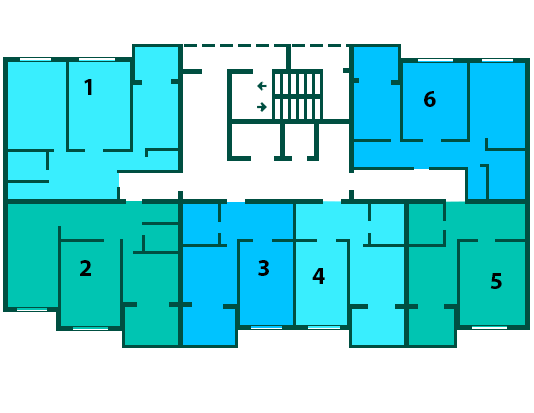
<style>
.page{position:relative;width:534px;height:413px;background:#ffffff}
.page>*{position:absolute;margin:0}
.t1{font:24px "MyriadPro-Bold";color:#000000;text-transform:uppercase}
</style>
<div class="page">
<p class="t1" style="left:84px;top:79px;width:8px;height:16px">1</p>
<p class="t1" style="left:424px;top:91px;width:12px;height:16px">6</p>
<p class="t1" style="left:80px;top:260px;width:11px;height:16px">2</p>
<p class="t1" style="left:258px;top:260px;width:11px;height:16px">3</p>
<p class="t1" style="left:312px;top:268px;width:13px;height:16px">4</p>
<p class="t1" style="left:490px;top:273px;width:12px;height:16px">5</p>
</div>
